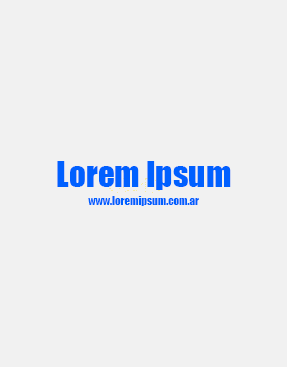
<style>
.page{position:relative;width:287px;height:367px;background:#f1f1f1}
.page>*{position:absolute;margin:0}
.t1{font:33.2px "Impact";color:#0060ff}
.t2{font:10.9px "Impact";color:#0060ff}
</style>
<div class="page">
<p class="t1" style="left:57px;top:161px;width:174px;height:29px">Lorem Ipsum</p>
<p class="t2" style="left:88px;top:196px;width:111px;height:10px">www.loremipsum.com.ar</p>
</div>
